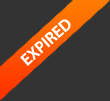
<style>
.page{position:relative;width:110px;height:101px;background:#333333}
.page>*{position:absolute;margin:0}
.t1{font:16.7px "MyriadPro-Semibold";color:#ffffff;text-transform:uppercase}
</style>
<div class="page">
<p class="t1" style="left:20px;top:19px;width:51px;height:47px;rotate:-42deg">EXPIRED</p>
</div>
